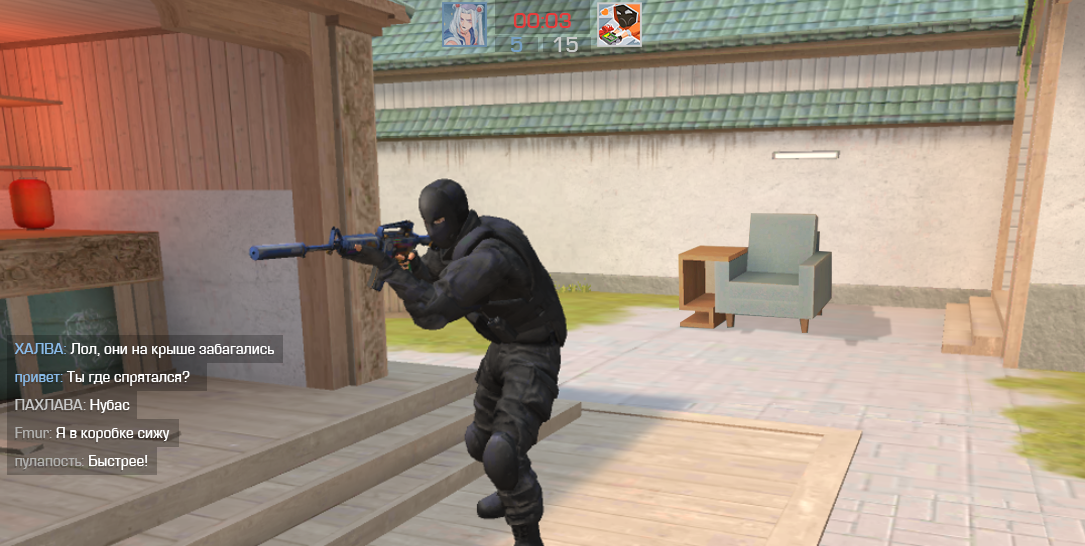
<style>
.page{position:relative;width:1085px;height:546px}
.page>*{position:absolute;margin:0}
.t1{font:22px "Eurostile-Med";color:#e73b3b}
.t2{font:22.1px "Eurostile-Med";color:#759fc4}
.t3{font:22.1px "Eurostile-Med";color:#c9cac9}
.t4{font:15.3px "Eurostile-Med";color:#ffffff}
.t5{font:15.3px "Eurostile-Med";color:#89bae7}
.t6{font:15.3px "Eurostile-Med";color:#c7c8c7}
.t7{font:15.3px "Eurostile-Med";color:#b1b1af}
</style>
<div class="page">
<p class="t1" style="left:513px;top:13px;width:58px;height:15px">00:03</p>
<p class="t2" style="left:511px;top:37px;width:12px;height:15px">5</p>
<p class="t3" style="left:553px;top:37px;width:25px;height:15px">15</p>
<p class="t4" style="left:14px;top:343px;width:260px;height:15px"><span class="t5">ХАЛВА:</span> Лол, они на крыше забагались</p>
<p class="t4" style="left:15px;top:371px;width:175px;height:15px"><span class="t5">привет:</span> Ты где спрятался?</p>
<p class="t6" style="left:15px;top:399px;width:115px;height:14px">ПАХЛАВА:<span class="t4"> Нубас</span></p>
<p class="t4" style="left:15px;top:427px;width:155px;height:15px"><span class="t7">Fmur: </span>Я в коробке сижу</p>
<p class="t7" style="left:15px;top:455px;width:133px;height:15px">пулапость: <span class="t4">Быстрее!</span></p>
</div>
